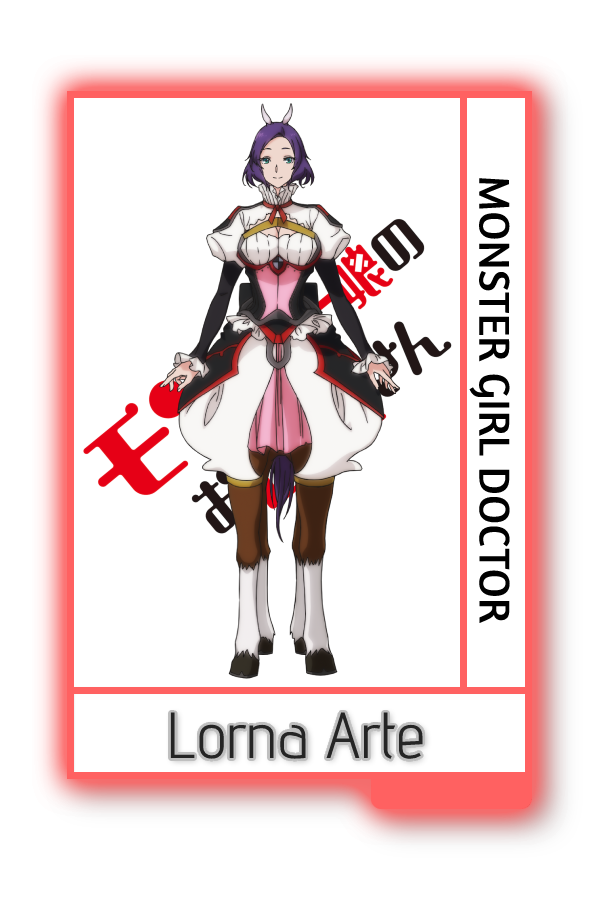
<style>
.page{position:relative;width:600px;height:900px;background:#ffffff}
.page>*{position:absolute;margin:0}
.t1{font:44px "Amaranth-Regular";color:#000000}
.t2{font:65px "AdventPro-Regular";color:#252525}
</style>
<div class="page">
<p class="t1" style="left:469px;top:178px;width:41px;height:446px;rotate:90deg">MONSTER GIRL DOCTOR</p>
<p class="t2" style="left:170px;top:712px;width:253px;height:47px">Lorna Arte</p>
</div>
